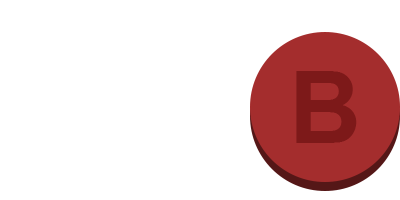
<style>
.page{position:relative;width:400px;height:200px;background:#ffffff}
.page>*{position:absolute;margin:0}
.t1{font:100px "Arial-BoldMT";color:#7c1919}
</style>
<div class="page">
<p class="t1" style="left:296px;top:71px;width:61px;height:72px">B</p>
</div>
